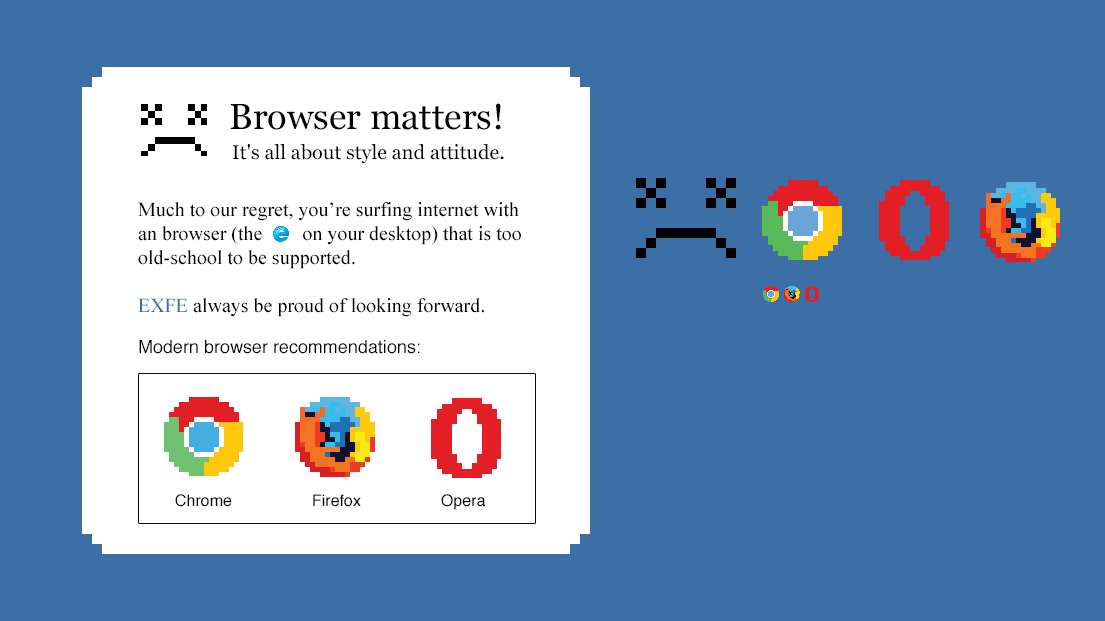
<style>
.page{position:relative;width:1105px;height:621px;background:#3b6fa5}
.page>*{position:absolute;margin:0}
.t1{font:36px "Georgia";color:#000000}
.t2{font:20px "Georgia";color:#000000}
.t3{font:20px/24px "TimesNewRomanPSMT";color:#000000}
.t4{font:20px/24px "TimesNewRomanPSMT";color:#3a6fa6}
.t5{font:18px "Helvetica";color:#010101}
.t6{font:16px "Helvetica";color:#000000}
</style>
<div class="page">
<p class="t1" style="left:230px;top:103px;width:271px;height:27px">Browser matters!</p>
<p class="t2" style="left:232px;top:144px;width:272px;height:20px">It's all about style and attitude.</p>
<p class="t3" style="left:138px;top:202px;width:383px;height:115px">Much to our regret, you’re surfing internet with an browser (the        on your desktop) that is too old-school to be supported. <br><span class="t4"><br>EXFE</span> always be proud of looking forward.</p>
<p class="t5" style="left:139px;top:340px;width:281px;height:14px">Modern browser recommendations:</p>
<p class="t6" style="left:175px;top:494px;width:57px;height:13px">Chrome</p>
<p class="t6" style="left:313px;top:494px;width:48px;height:13px">Firefox</p>
<p class="t6" style="left:441px;top:494px;width:44px;height:16px">Opera</p>
</div>
